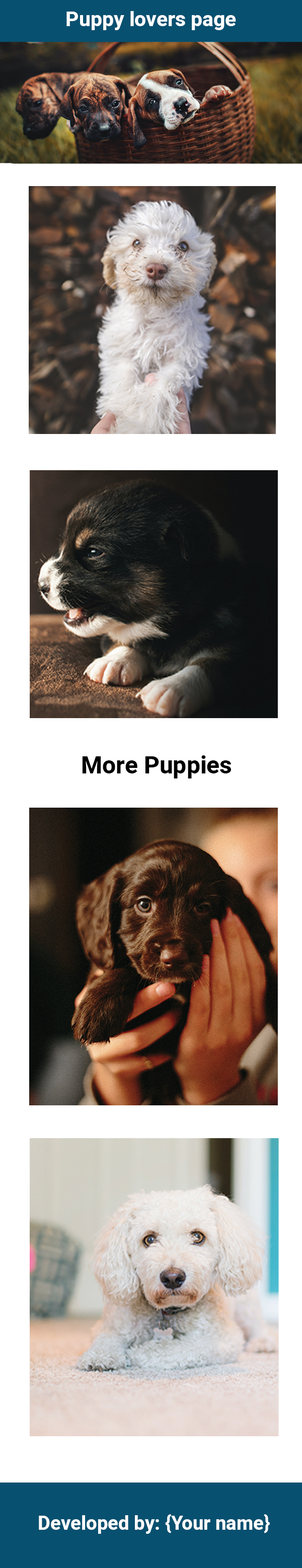
<style>
.page{position:relative;width:302px;height:1568px;background:#ffffff}
.page>*{position:absolute;margin:0}
.t1{font:20.5px "Heebo-Bold";color:#ffffff}
.t2{font:24.1px "Heebo-Bold";color:#000000}
.t3{font:19.2px "Heebo-Bold";color:#ffffff}
</style>
<div class="page">
<p class="t1" style="left:66px;top:11px;width:170px;height:19px">Puppy lovers page</p>
<p class="t2" style="left:82px;top:755px;width:149px;height:23px">More Puppies</p>
<p class="t3" style="left:39px;top:1514px;width:231px;height:20px">Developed by: {Your name}</p>
</div>
